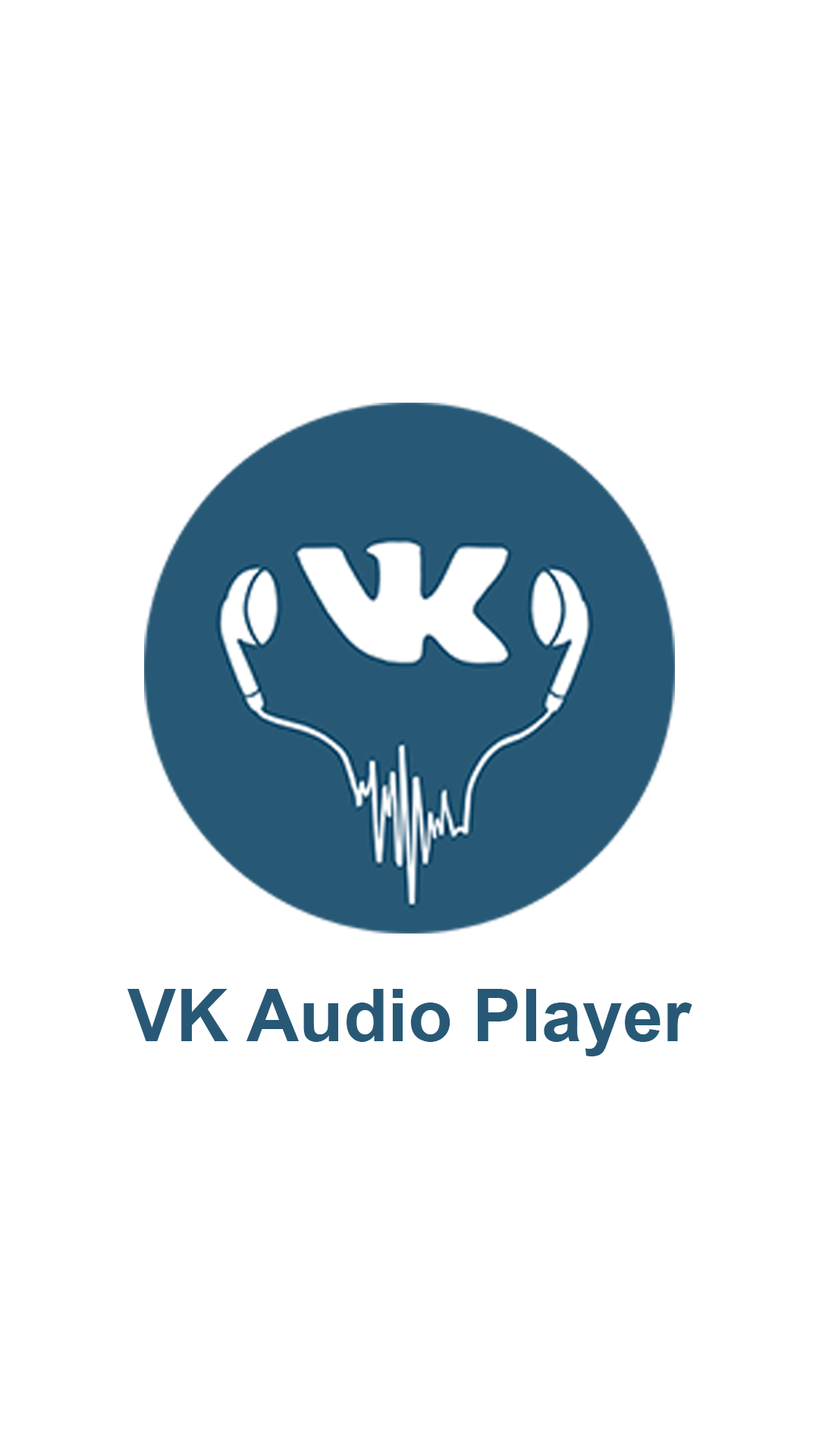
<style>
.page{position:relative;width:819px;height:1456px;background:#ffffff}
.page>*{position:absolute;margin:0}
.t1{font:72.8px "Arial-BoldMT";color:#275976}
</style>
<div class="page">
<p class="t1" style="left:127px;top:989px;width:565px;height:67px">VK Audio Player</p>
</div>
